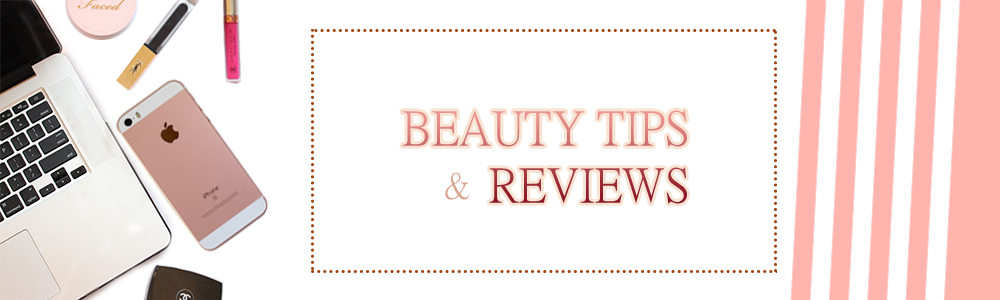
<style>
.page{position:relative;width:1000px;height:300px;background:#ffffff}
.page>*{position:absolute;margin:0}
.t1{font:48px "PMingLiU";letter-spacing:0.001em}
.t2{font:36px "PMingLiU";letter-spacing:0.001em;color:#dca290}
</style>
<div class="page">
<p class="t1" style="left:402px;top:110px;width:285px;height:94px;text-align:right">BEAUTY TIPS REVIEWS</p>
<p class="t2" style="left:445px;top:172px;width:25px;height:28px">&amp;</p>
</div>
